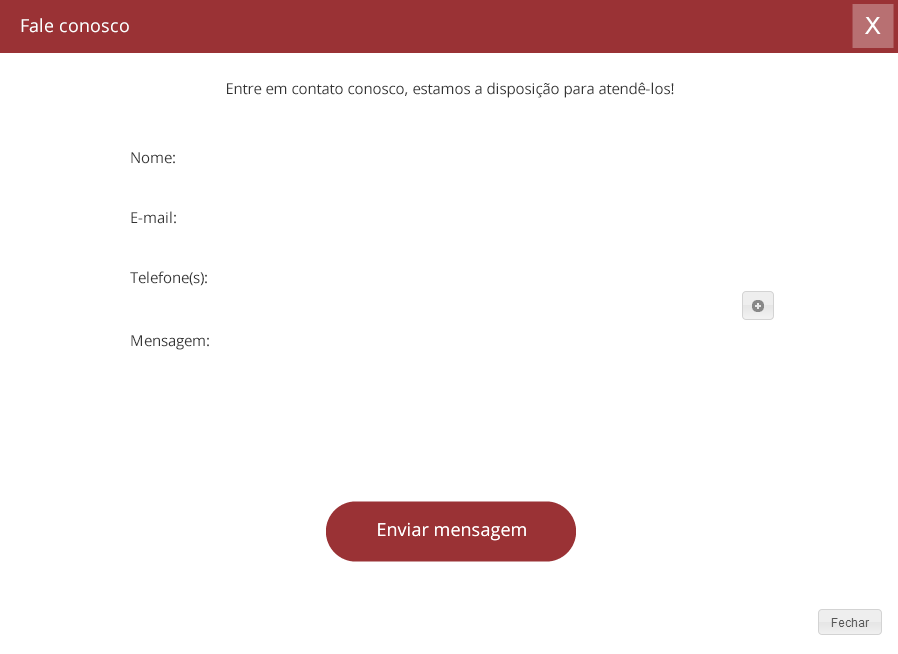
<style>
.page{position:relative;width:898px;height:654px;background:#ffffff}
.page>*{position:absolute;margin:0}
.t1{font:32px "CenturyGothic";color:#ffffff}
.t2{font:18px "OpenSans";color:#ffffff}
.t3{font:15px "OpenSans";color:#333333}
</style>
<div class="page">
<p class="t1" style="left:865px;top:17px;width:16px;height:17px">x</p>
<p class="t2" style="left:21px;top:18px;width:108px;height:15px">Fale conosco</p>
<p class="t3" style="left:227px;top:82px;width:447px;height:16px">Entre em contato conosco, estamos a disposição para atendê-los!</p>
<p class="t3" style="left:131px;top:152px;width:44px;height:12px">Nome:</p>
<p class="t3" style="left:131px;top:211px;width:45px;height:13px">E-mail:</p>
<p class="t3" style="left:130px;top:271px;width:77px;height:15px">Telefone(s):</p>
<p class="t3" style="left:131px;top:335px;width:78px;height:15px">Mensagem:</p>
</div>
